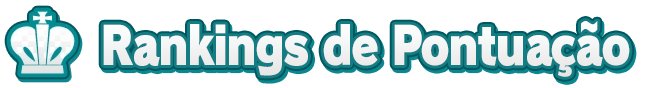
<style>
.page{position:relative;width:650px;height:88px;background:#ffffff}
.page>*{position:absolute;margin:0}
.t1{font:52px "RodinPro-UB";letter-spacing:-0.041em;color:#f2f2f3;scale:0.86 1}
</style>
<div class="page">
<p class="t1" style="left:103px;top:21px;width:527px;height:56px">Rankings de Pontuação</p>
</div>
